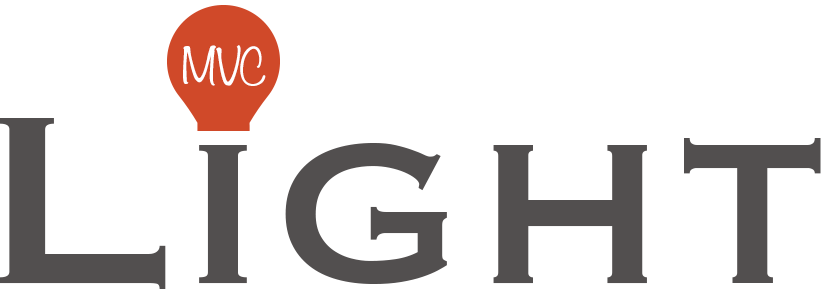
<style>
.page{position:relative;width:821px;height:289px;background:#ffffff}
.page>*{position:absolute;margin:0}
.t1{font:44.6px "Noteworthy-Light";color:#ffffff}
.t2{font:312.6px "Copperplate";color:#524f4f}
</style>
<div class="page">
<p class="t1" style="left:183px;top:45px;width:33px;height:41px">M</p>
<p class="t1" style="left:216px;top:45px;width:25px;height:41px">V</p>
<p class="t1" style="left:240px;top:46px;width:26px;height:40px">C</p>
<p class="t2" style="left:0px;top:118px;width:821px;height:171px">Light</p>
</div>
